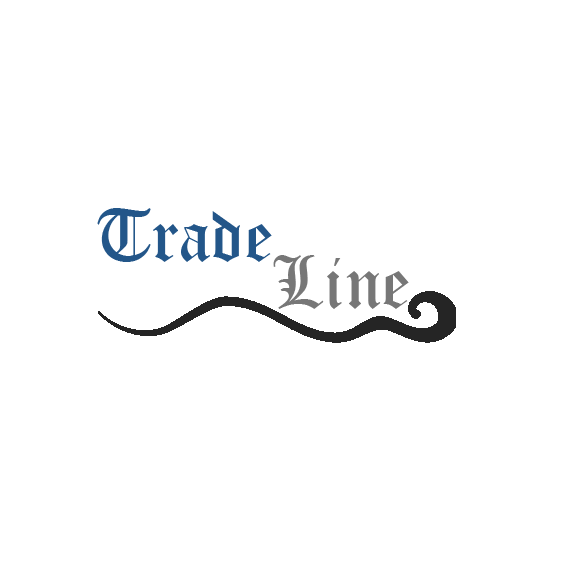
<style>
.page{position:relative;width:580px;height:580px;background:#ffffff}
.page>*{position:absolute;margin:0}
.t1{font:72px "OldEnglishTextMT";color:#235689}
.t2{font:72px "OldEnglishTextMT";color:#777777}
</style>
<div class="page">
<p class="t1" style="left:97px;top:208px;width:175px;height:54px">Trade</p>
<p class="t2" style="left:273px;top:255px;width:136px;height:54px">Line</p>
</div>
